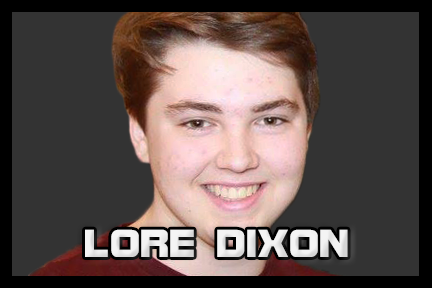
<style>
.page{position:relative;width:432px;height:288px;background:#333333}
.page>*{position:absolute;margin:0}
.t1{font:41.7px "BolsterBold";color:#f3f3f3}
</style>
<div class="page">
<p class="t1" style="left:85px;top:229px;width:263px;height:28px">LORE DIXON</p>
</div>
